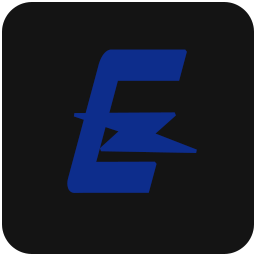
<style>
.page{position:relative;width:256px;height:256px;background:#141414}
.page>*{position:absolute;margin:0}
.t1{font:194px "TIMETRAVEL";color:#0d2d8c;font-weight:bold;scale:0.58 1}
</style>
<div class="page">
<p class="t1" style="left:67px;top:49px;width:130px;height:144px">E</p>
</div>
